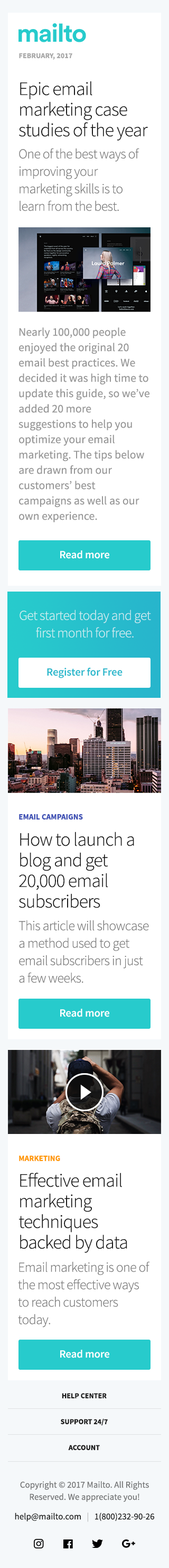
<style>
.page{position:relative;width:169px;height:1568px;background:#ffffff}
.page>*{position:absolute;margin:0}
.t1{font:7.4px "SourceSansPro-Bold";letter-spacing:0.009em;color:#a7a7a7}
.t2{font:19px/20.6px "SourceSansPro-Light";letter-spacing:-0.03em;color:#1a1a1a}
.t3{font:13.7px/17.4px "SourceSansPro-Light";letter-spacing:-0.027em;color:#7b7b7b}
.t4{font:11.6px/15.3px "SourceSansPro-Regular";color:#979797}
.t5{font:11.1px "SourceSansPro-Semibold";letter-spacing:-0.01em;color:#ffffff}
.t6{font:13.7px/17.4px "SourceSansPro-Light";letter-spacing:-0.027em;color:#cfeef1}
.t7{font:11.1px "SourceSansPro-Semibold";letter-spacing:-0.01em;color:#27b8cc}
.t8{font:7.9px "SourceSansPro-Bold";color:#3f51b5}
.t9{font:7.9px "SourceSansPro-Bold";color:#ff9800}
.t10{font:7.4px/25.9px "SourceSansPro-Bold";color:#1a1a1a}
.t11{font:9px/12.2px "SourceSansPro-Regular";color:#727374}
.t12{font:9px/12.2px "SourceSansPro-Regular";color:#1a1a1a}
.t13{font:9px/12.2px "SourceSansPro-Regular";color:#bebebe}
</style>
<div class="page">
<p class="t1" style="left:19px;top:53px;width:53px;height:7px">FEBRUARY, 2017</p>
<p class="t2" style="left:19px;top:81px;width:129px;height:60px">Epic email marketing case studies of the year</p>
<p class="t3" style="left:19px;top:148px;width:121px;height:63px">One of the best ways of improving your  <br>marketing skills is to learn from the best.</p>
<p class="t4" style="left:19px;top:327px;width:131px;height:195px">Nearly 100,000 people enjoyed the original 20 email best practices. We decided it was high time to update this guide, so we’ve added 20 more suggestions to help you optimize your email marketing. The tips below are drawn from our customers’ best campaigns as well as our own experience.</p>
<p class="t5" style="left:60px;top:550px;width:49px;height:9px">Read more</p>
<p class="t6" style="left:20px;top:610px;width:131px;height:28px;text-align:center">Get started today and get first month for free.</p>
<p class="t7" style="left:47px;top:668px;width:76px;height:10px">Register for Free</p>
<p class="t8" style="left:19px;top:814px;width:64px;height:6px">EMAIL CAMPAIGNS</p>
<p class="t2" style="left:19px;top:832px;width:115px;height:76px">How to launch a blog and get 20,000 email subscribers</p>
<p class="t3" style="left:19px;top:920px;width:130px;height:63px">This article will showcase a method used to get email subscribers in just a few weeks.</p>
<p class="t5" style="left:60px;top:1009px;width:49px;height:8px">Read more</p>
<p class="t9" style="left:19px;top:1156px;width:41px;height:5px">MARKETING</p>
<p class="t2" style="left:19px;top:1173px;width:108px;height:80px">Effective email marketing techniques backed by data</p>
<p class="t3" style="left:18px;top:1261px;width:132px;height:66px">Email marketing is one of the most effective ways to reach customers today.</p>
<p class="t5" style="left:60px;top:1350px;width:49px;height:8px">Read more</p>
<p class="t10" style="left:61px;top:1393px;width:47px;height:57px;text-align:center">HELP CENTER<br>SUPPORT 24/7<br>ACCOUNT</p>
<p class="t11" style="left:15px;top:1481px;width:139px;height:41px;text-align:center">Copyright © 2017 Mailto. All Rights Reserved. We appreciate you!<br><span class="t12">help@mailto.com   </span><span class="t13">|   </span><span class="t12">1(800)232-90-26</span></p>
</div>
